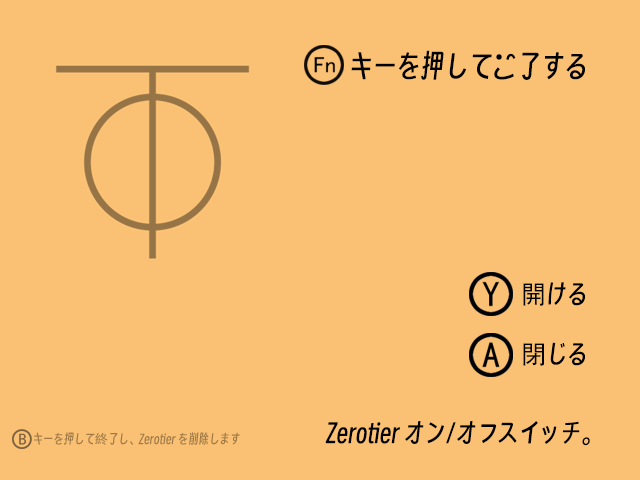
<style>
.page{position:relative;width:640px;height:480px;background:#fac174}
.page>*{position:absolute;margin:0}
.t1{font:30px "SmileySans-Oblique";color:#000000}
.t2{font:26px/30px "SmileySans-Oblique";color:#000000}
.t3{font:26px/30px "AdobeHeitiStd-Regular";color:#000000}
.t4{font:26px "SmileySans-Oblique";color:#000000}
.t5{font:13px "SmileySans-Oblique";color:#9f7a47}
.t6{font:13px "AdobeHeitiStd-Regular";color:#9f7a47}
</style>
<div class="page">
<p class="t1" style="left:351px;top:50px;width:234px;height:30px">キーを押して終了する</p>
<p class="t2" style="left:523px;top:282px;width:62px;height:84px;text-align:right"><span class="t3">開</span>ける<br><span class="t3"><br>閉</span>じる</p>
<p class="t4" style="left:325px;top:421px;width:265px;height:25px">Zerotier オン/オフスイッチ。</p>
<p class="t5" style="left:33px;top:432px;width:207px;height:13px">キーを押して<span class="t6">終</span>了し、Zerotier を削除します</p>
</div>
